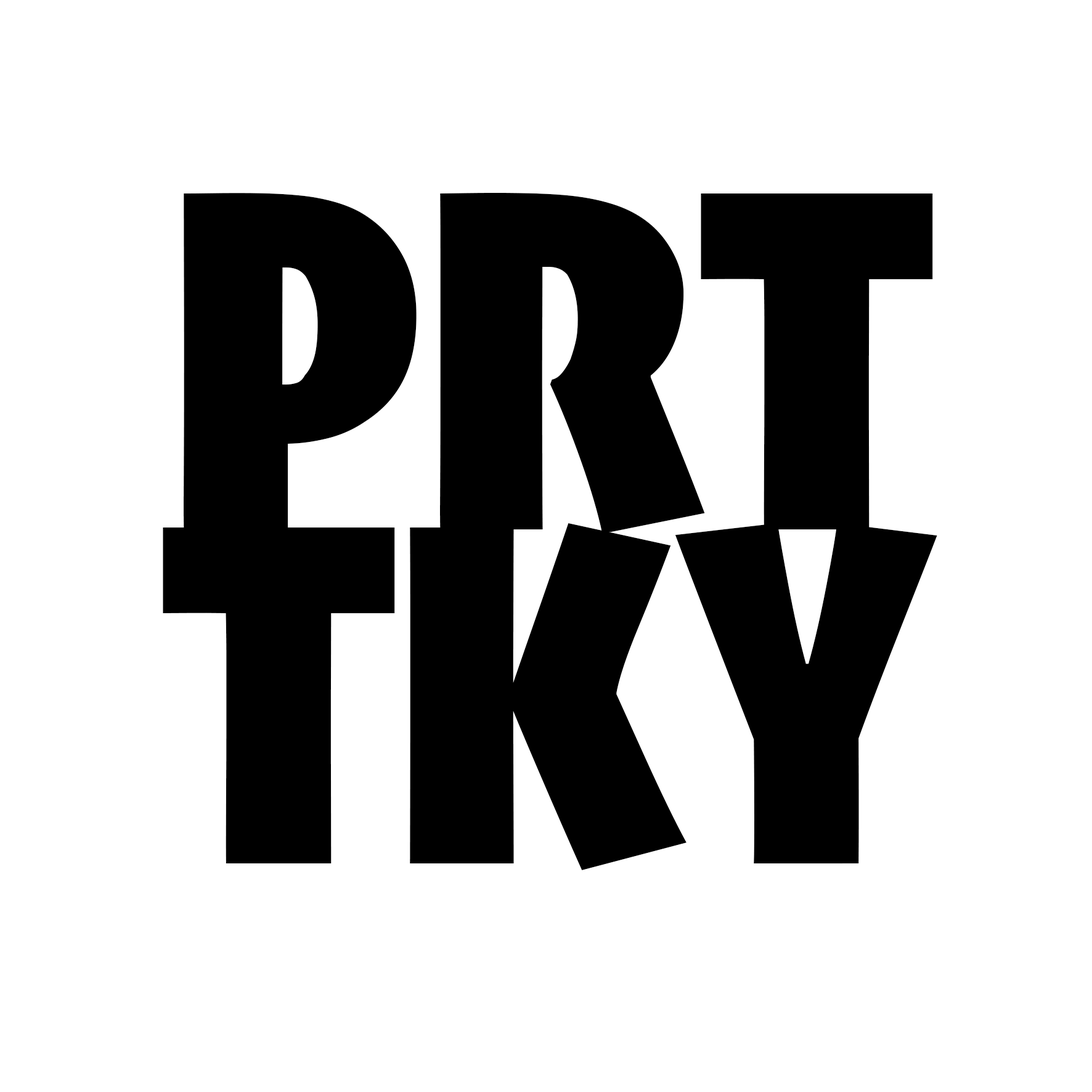
<style>
.page{position:relative;width:1092px;height:1092px;background:#ffffff}
.page>*{position:absolute;margin:0}
.t1{font:513.5px/333.8px "Skia_2.563wght_0.700wdth";color:#000000}
</style>
<div class="page">
<p class="t1" style="left:163px;top:193px;width:774px;height:677px;text-align:center">PRT<br>TKY</p>
</div>
